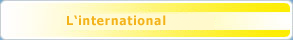
<style>
.page{position:relative;width:293px;height:40px}
.page>*{position:absolute;margin:0}
.t1{font:12.6px "Verdana-Bold";letter-spacing:0.05em;color:#f3b31a;scale:0.89 1}
</style>
<div class="page">
<p class="t1" style="left:67px;top:15px;width:99px;height:11px">L‘international</p>
</div>
